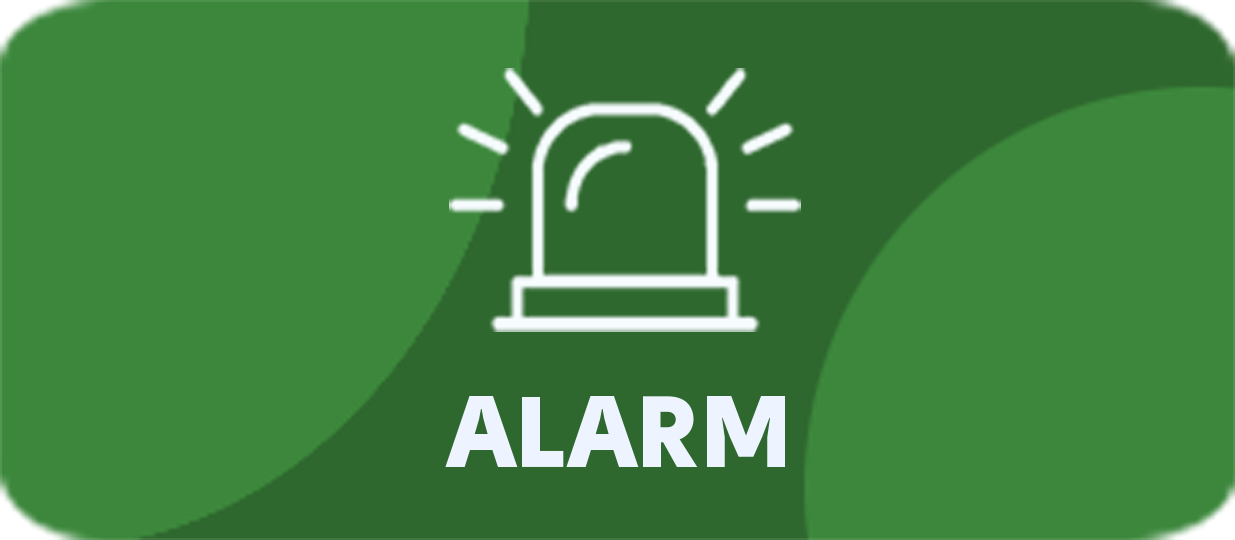
<style>
.page{position:relative;width:1235px;height:540px;background:#3c873c}
.page>*{position:absolute;margin:0}
.t1{font:100.7px "Solomon-Sans-Black";color:#eef4ff}
</style>
<div class="page">
<p class="t1" style="left:445px;top:396px;width:340px;height:71px">ALARM</p>
</div>
